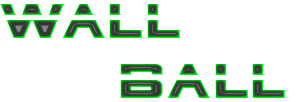
<style>
.page{position:relative;width:300px;height:102px;background:#ffffff}
.page>*{position:absolute;margin:0}
.t1{font:50px "BorgNine-Regular"}
</style>
<div class="page">
<p class="t1" style="left:0px;top:4px;width:285px;height:94px">WALL                  BALL</p>
</div>
